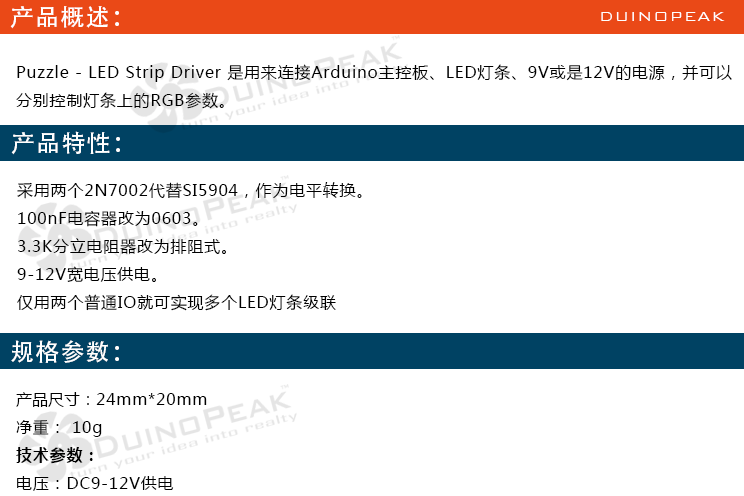
<style>
.page{position:relative;width:744px;height:496px;background:#ffffff}
.page>*{position:absolute;margin:0}
.t1{font:24px "AdobeHeitiStd-Regular";letter-spacing:0.05em;color:#ffffff}
.t2{font:18px "BankGothicBT-Light";letter-spacing:0.05em;color:#ffffff}
.t3{font:16px "MicrosoftYaHei";letter-spacing:0.05em;color:#000000}
.t4{font:16px "MicrosoftYaHei";color:#000000}
.t5{font:16px "MicrosoftYaHei-Bold";letter-spacing:0.05em;color:#000000}
</style>
<div class="page">
<p class="t1" style="left:10px;top:6px;width:109px;height:23px">产品概述：</p>
<p class="t2" style="left:601px;top:12px;width:124px;height:9px">DUINOPEAK</p>
<p class="t3" style="left:16px;top:64px;width:716px;height:45px">Puzzle - LED Strip Driver 是用来连接Arduino主控板、LED灯条、9V或是12V的电源，并可以<br>分别控制灯条上的RGB参数。</p>
<p class="t1" style="left:11px;top:131px;width:109px;height:24px">产品特性：</p>
<p class="t3" style="left:17px;top:182px;width:345px;height:129px">采用两个2N7002代替SI5904，作为电平转换。<br>100nF电容器改为0603。<br>3.3K分立电阻器改为排阻式。<br>9-12V宽电压供电。<br>仅用两个普通IO就可实现多个LED灯条级联</p>
<p class="t1" style="left:11px;top:340px;width:108px;height:23px">规格参数：</p>
<p class="t3" style="left:16px;top:392px;width:191px;height:99px"><span class="t4">产品尺寸：</span>24mm*20mm<br>净重： 10g<br><span class="t5">技术参数：<br></span>电压：DC9-12V供电</p>
</div>
